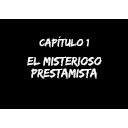
<style>
.page{position:relative;width:128px;height:128px;background:#000000}
.page>*{position:absolute;margin:0}
.t1{font:10.7px "EdoSZ";color:#ffffff;scale:1.05 1}
.t2{font:12.3px/11.8px "EdoSZ";color:#ffffff}
</style>
<div class="page">
<p class="t1" style="left:39px;top:36px;width:50px;height:12px">Capítulo 1</p>
<p class="t2" style="left:27px;top:56px;width:75px;height:23px;text-align:center">EL MISTERIOSO<br>PRESTAMISTA</p>
</div>
